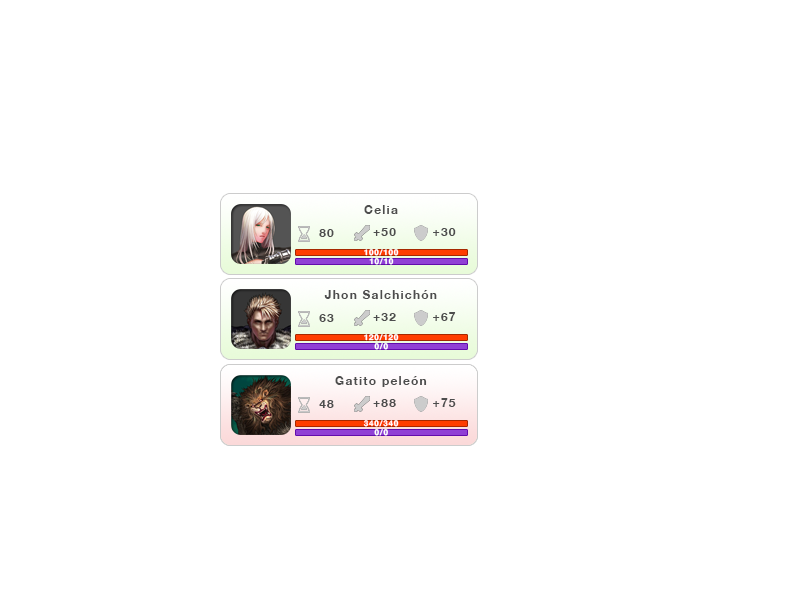
<style>
.page{position:relative;width:800px;height:600px;background:#ffffff}
.page>*{position:absolute;margin:0}
.t1{font:12px "HelveticaNeue-Bold";letter-spacing:0.1em;color:#4d4d4d}
.t2{font:8px "HelveticaNeue-Bold";letter-spacing:0.1em;color:#ffffff}
</style>
<div class="page">
<p class="t1" style="left:364px;top:205px;width:34px;height:9px">Celia</p>
<p class="t1" style="left:319px;top:229px;width:15px;height:8px">80</p>
<p class="t1" style="left:373px;top:228px;width:23px;height:8px">+50</p>
<p class="t1" style="left:433px;top:228px;width:23px;height:8px">+30</p>
<p class="t2" style="left:364px;top:249px;width:35px;height:7px">100/100</p>
<p class="t2" style="left:369px;top:258px;width:25px;height:7px">10/10</p>
<p class="t1" style="left:324px;top:290px;width:113px;height:9px">Jhon Salchichón</p>
<p class="t1" style="left:319px;top:314px;width:15px;height:8px">63</p>
<p class="t1" style="left:373px;top:313px;width:23px;height:8px">+32</p>
<p class="t1" style="left:433px;top:312px;width:23px;height:9px">+67</p>
<p class="t2" style="left:364px;top:334px;width:35px;height:7px">120/120</p>
<p class="t2" style="left:374px;top:343px;width:14px;height:7px">0/0</p>
<p class="t1" style="left:335px;top:376px;width:92px;height:11px">Gatito peleón</p>
<p class="t1" style="left:319px;top:400px;width:15px;height:8px">48</p>
<p class="t1" style="left:373px;top:399px;width:23px;height:8px">+88</p>
<p class="t1" style="left:433px;top:398px;width:23px;height:9px">+75</p>
<p class="t2" style="left:363px;top:420px;width:36px;height:7px">340/340</p>
<p class="t2" style="left:374px;top:429px;width:14px;height:7px">0/0</p>
</div>
